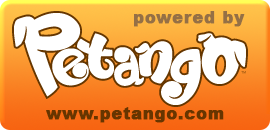
<style>
.page{position:relative;width:270px;height:130px;background:#ffffff}
.page>*{position:absolute;margin:0}
.t1{font:16px "Arial-Black";letter-spacing:0.04em;color:#957045;font-weight:bold}
.t2{font:16px "Arial-Black";letter-spacing:0.04em;color:#673500;font-weight:bold}
</style>
<div class="page">
<p class="t1" style="left:134px;top:11px;width:111px;height:16px">powered by</p>
<p class="t2" style="left:46px;top:107px;width:178px;height:16px">www.petango.com</p>
</div>
